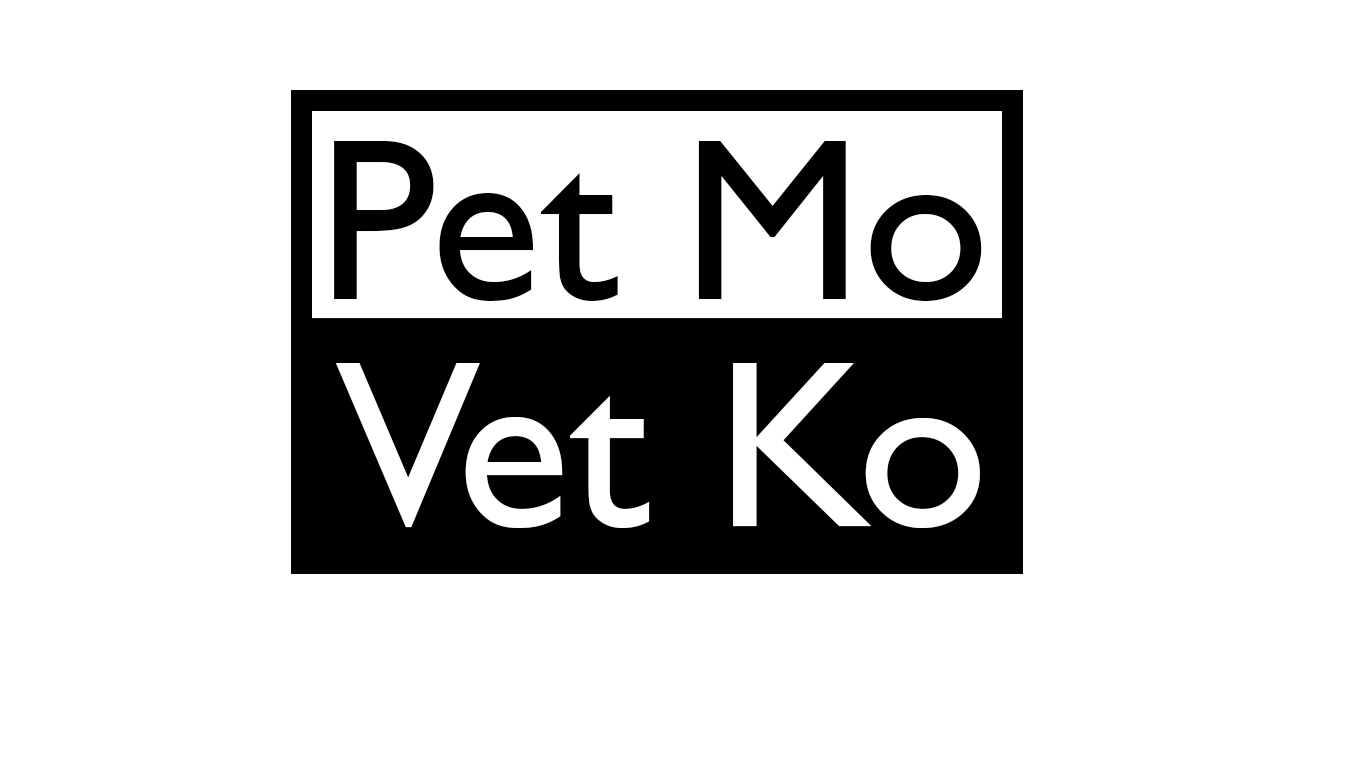
<style>
.page{position:relative;width:1366px;height:768px;background:#ffffff}
.page>*{position:absolute;margin:0}
.t1{font:91.1px "GillSansMT";color:#000000}
.t2{font:93.9px "GillSansMT";color:#ffffff}
</style>
<div class="page">
<p class="t1" style="left:334px;top:141px;width:648px;height:160px">Pet Mo</p>
<p class="t2" style="left:336px;top:363px;width:644px;height:165px">Vet Ko</p>
</div>
